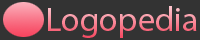
<style>
.page{position:relative;width:200px;height:40px;background:#333333}
.page>*{position:absolute;margin:0}
.t1{font:34px "MyriadPro-Regular";letter-spacing:0.005em}
</style>
<div class="page">
<p class="t1" style="left:48px;top:6px;width:149px;height:32px">Logopedia</p>
</div>
